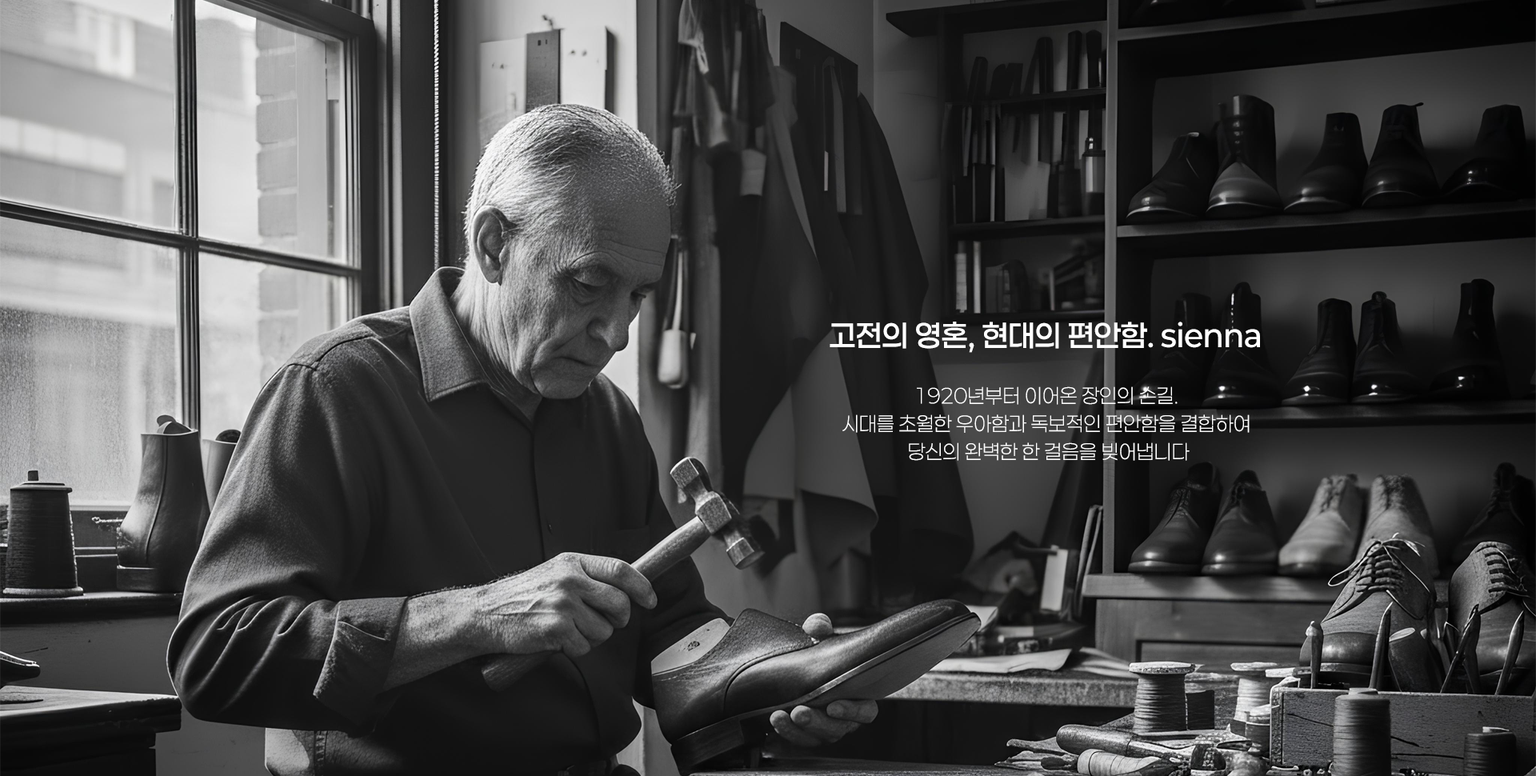
<style>
.page{position:relative;width:1536px;height:776px}
.page>*{position:absolute;margin:0}
.t1{font:30px "Paperlogy-5Medium";color:#ffffff}
.t2{font:20px/28px "Paperlogy-2ExtraLight";color:#ffffff}
</style>
<div class="page">
<p class="t1" style="left:830px;top:322px;width:430px;height:31px">고전의 영혼, 현대의 편안함. sienna</p>
<p class="t2" style="left:843px;top:386px;width:407px;height:75px;text-align:center">1920년부터 이어온 장인의 손길. <br>시대를 초월한 우아함과 독보적인 편안함을 결합하여 <br>당신의 완벽한 한 걸음을 빚어냅니다</p>
</div>
